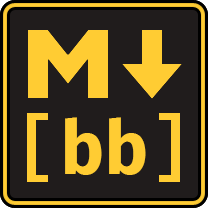
<style>
.page{position:relative;width:208px;height:208px;background:#201c1c}
.page>*{position:absolute;margin:0}
.t1{font:72px "FiraCode-SemiBold";color:#ffcc33}
.t2{font:72px "FiraCode-Bold";color:#ffcc33}
</style>
<div class="page">
<p class="t1" style="left:27px;top:113px;width:153px;height:69px">[  ]</p>
<p class="t1" style="left:27px;top:113px;width:153px;height:69px">[  ]</p>
<p class="t2" style="left:65px;top:117px;width:81px;height:58px">bb</p>
<p class="t2" style="left:65px;top:117px;width:81px;height:58px">bb</p>
</div>
